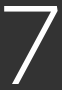
<style>
.page{position:relative;width:62px;height:90px;background:#333333}
.page>*{position:absolute;margin:0}
.t1{font:111.8px "NexaLight";color:#ffffff;scale:0.92 1}
</style>
<div class="page">
<p class="t1" style="left:4px;top:6px;width:54px;height:78px">7</p>
</div>
